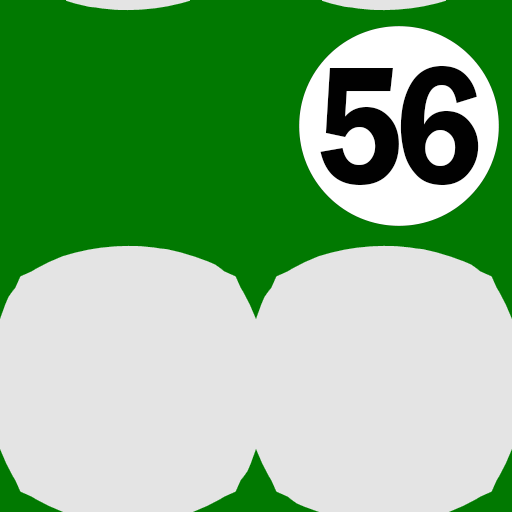
<style>
.page{position:relative;width:512px;height:512px;background:#e4e4e4}
.page>*{position:absolute;margin:0}
.t1{font:172.5px "FranklinGothic-Demi";letter-spacing:-0.05em;color:#010101;scale:0.87 1}
</style>
<div class="page">
<p class="t1" style="left:320px;top:66px;width:159px;height:119px">56</p>
</div>
